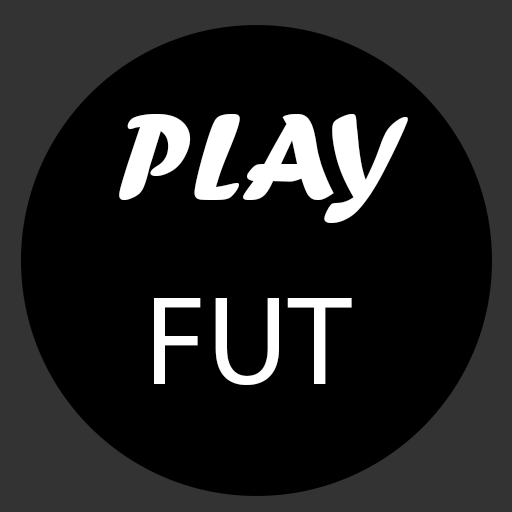
<style>
.page{position:relative;width:512px;height:512px;background:#000000}
.page>*{position:absolute;margin:0}
.t1{font:127.5px "ForteMT";color:#ffffff}
.t2{font:127.5px "MyriadPro-Regular";color:#ffffff}
</style>
<div class="page">
<p class="t1" style="left:119px;top:114px;width:289px;height:109px">PLAY</p>
<p class="t2" style="left:154px;top:298px;width:198px;height:87px">FUT</p>
</div>
